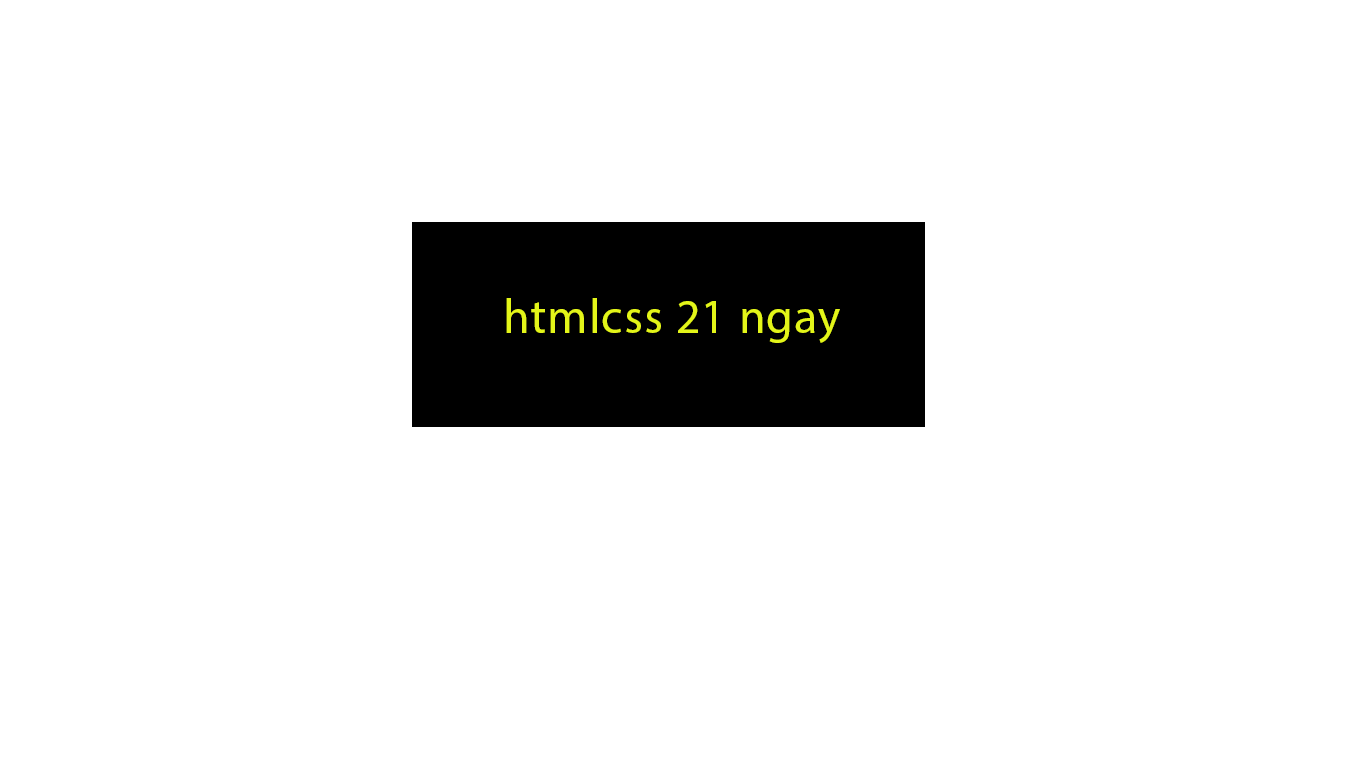
<style>
.page{position:relative;width:1366px;height:768px;background:#ffffff}
.page>*{position:absolute;margin:0}
.t1{font:48px "MyriadPro-Regular";letter-spacing:0.025em;color:#e3f519}
</style>
<div class="page">
<p class="t1" style="left:506px;top:298px;width:334px;height:45px">htmlcss 21 ngay</p>
</div>
